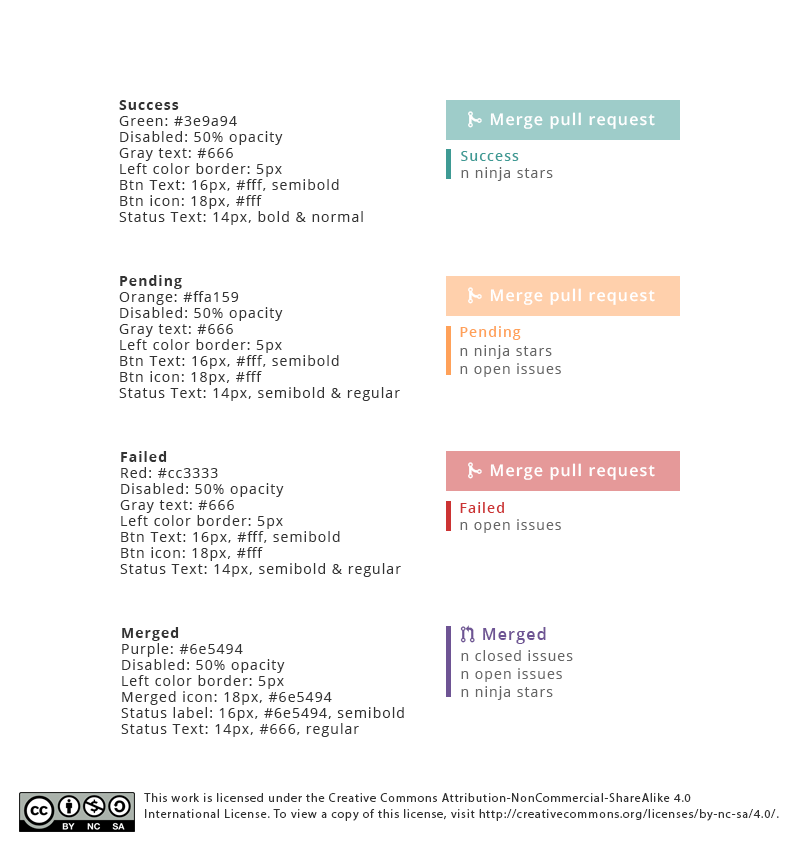
<style>
.page{position:relative;width:800px;height:850px;background:#ffffff}
.page>*{position:absolute;margin:0}
.t1{font:14px/16px "OpenSans";letter-spacing:0.075em;color:#333333}
.t2{font:14px/16px "OpenSans-Bold";letter-spacing:0.075em;color:#333333}
.t3{font:16px "OpenSans-Semibold";letter-spacing:0.075em;color:#ffffff}
.t4{font:14px "OpenSans-Semibold";letter-spacing:0.075em;color:#3e9a94}
.t5{font:14px "OpenSans";letter-spacing:0.075em;color:#666666}
.t6{font:14px "OpenSans-Semibold";letter-spacing:0.075em;color:#ffa159}
.t7{font:14px/18px "OpenSans";letter-spacing:0.075em;color:#666666}
.t8{font:14px "OpenSans-Semibold";letter-spacing:0.075em;color:#cc3333}
.t9{font:16px "OpenSans-Semibold";letter-spacing:0.075em;color:#6e5494}
.t10{font:12px/16px "MyriadPro-Regular";letter-spacing:0.075em;color:#333333}
</style>
<div class="page">
<p class="t1" style="left:119px;top:100px;width:244px;height:125px"><span class="t2">Success<br></span>Green: #3e9a94<br>Disabled: 50% opacity<br>Gray text: #666<br>Left color border: 5px<br>Btn Text: 16px, #fff, semibold<br>Btn icon: 18px, #fff<br>Status Text: 14px, bold &amp; normal</p>
<p class="t3" style="left:490px;top:112px;width:165px;height:17px">Merge pull request</p>
<p class="t4" style="left:461px;top:151px;width:58px;height:10px">Success</p>
<p class="t5" style="left:461px;top:167px;width:92px;height:14px">n ninja stars</p>
<p class="t1" style="left:119px;top:275px;width:281px;height:126px"><span class="t2">Pending<br></span>Orange: #ffa159<br>Disabled: 50% opacity<br>Gray text: #666<br>Left color border: 5px<br>Btn Text: 16px, #fff, semibold<br>Btn icon: 18px, #fff<br>Status Text: 14px, semibold &amp; regular</p>
<p class="t3" style="left:490px;top:288px;width:165px;height:17px">Merge pull request</p>
<p class="t6" style="left:460px;top:326px;width:61px;height:14px">Pending</p>
<p class="t7" style="left:460px;top:345px;width:101px;height:32px">n ninja stars<br>n open issues</p>
<p class="t1" style="left:120px;top:451px;width:281px;height:126px"><span class="t2">Failed<br></span>Red: #cc3333<br>Disabled: 50% opacity<br>Gray text: #666<br>Left color border: 5px<br>Btn Text: 16px, #fff, semibold<br>Btn icon: 18px, #fff<br>Status Text: 14px, semibold &amp; regular</p>
<p class="t3" style="left:490px;top:463px;width:165px;height:17px">Merge pull request</p>
<p class="t8" style="left:460px;top:502px;width:44px;height:11px">Failed</p>
<p class="t5" style="left:460px;top:519px;width:101px;height:14px">n open issues</p>
<p class="t1" style="left:121px;top:627px;width:283px;height:110px"><span class="t2">Merged<br></span>Purple: #6e5494<br>Disabled: 50% opacity<br>Left color border: 5px<br>Merged icon: 18px, #6e5494<br>Status label: 16px, #6e5494, semibold<br>Status Text: 14px, #666, regular</p>
<p class="t9" style="left:483px;top:627px;width:63px;height:17px">Merged</p>
<p class="t7" style="left:461px;top:650px;width:112px;height:50px">n closed issues<br>n open issues<br>n ninja stars</p>
<p class="t10" style="left:144px;top:793px;width:635px;height:28px">This work is licensed under the Creative Commons Attribution-NonCommercial-ShareAlike 4.0 <br>International License. To view a copy of this license, visit http://creativecommons.org/licenses/by-nc-sa/4.0/.</p>
</div>
